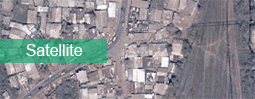
<style>
.page{position:relative;width:255px;height:99px}
.page>*{position:absolute;margin:0}
.t1{font:16px "ArialMT";color:#ffffff}
</style>
<div class="page">
<p class="t1" style="left:26px;top:44px;width:57px;height:12px">Satellite</p>
</div>
